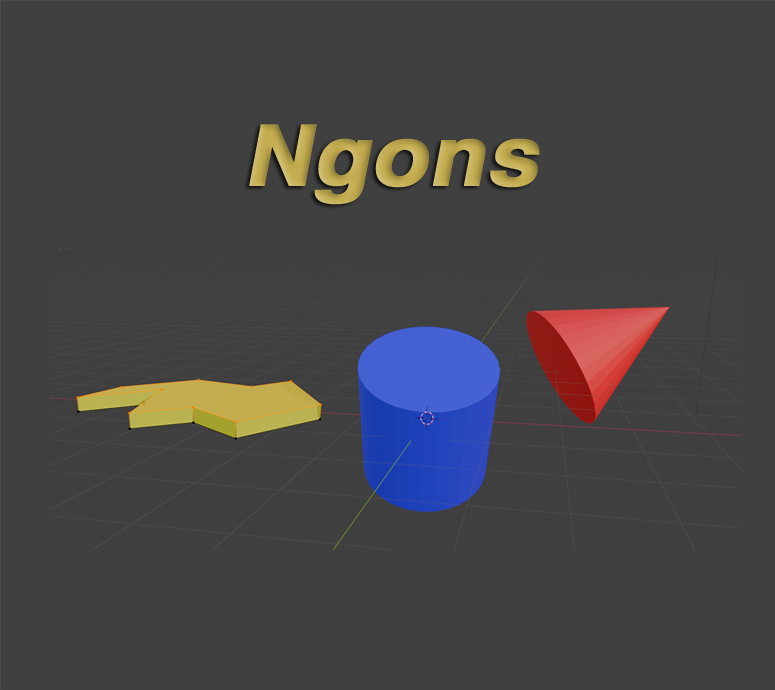
<style>
.page{position:relative;width:775px;height:690px;background:#404040}
.page>*{position:absolute;margin:0}
.t1{font:84.5px "HelveticaLTStd-Bold";color:#c3ac4f;font-weight:bold;font-style:italic;scale:1.08 1}
</style>
<div class="page">
<p class="t1" style="left:249px;top:124px;width:291px;height:81px">Ngons</p>
</div>
